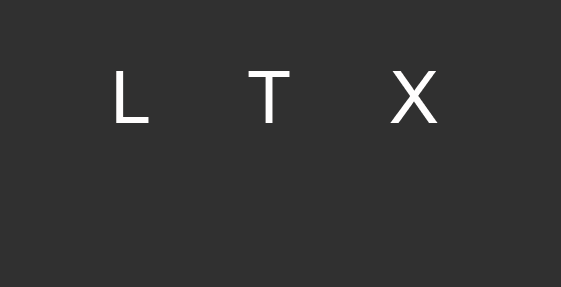
<style>
.page{position:relative;width:561px;height:287px;background:#303030}
.page>*{position:absolute;margin:0}
.t1{font:72px "ArialMT";color:#fffefe}
</style>
<div class="page">
<p class="t1" style="left:116px;top:71px;width:322px;height:52px">L     T     X</p>
</div>
